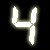
<style>
.page{position:relative;width:50px;height:50px;background:#000000}
.page>*{position:absolute;margin:0}
.t1{font:55px "LiquidCrystal";color:#ffffff}
</style>
<div class="page">
<p class="t1" style="left:12px;top:6px;width:25px;height:39px">4</p>
</div>
